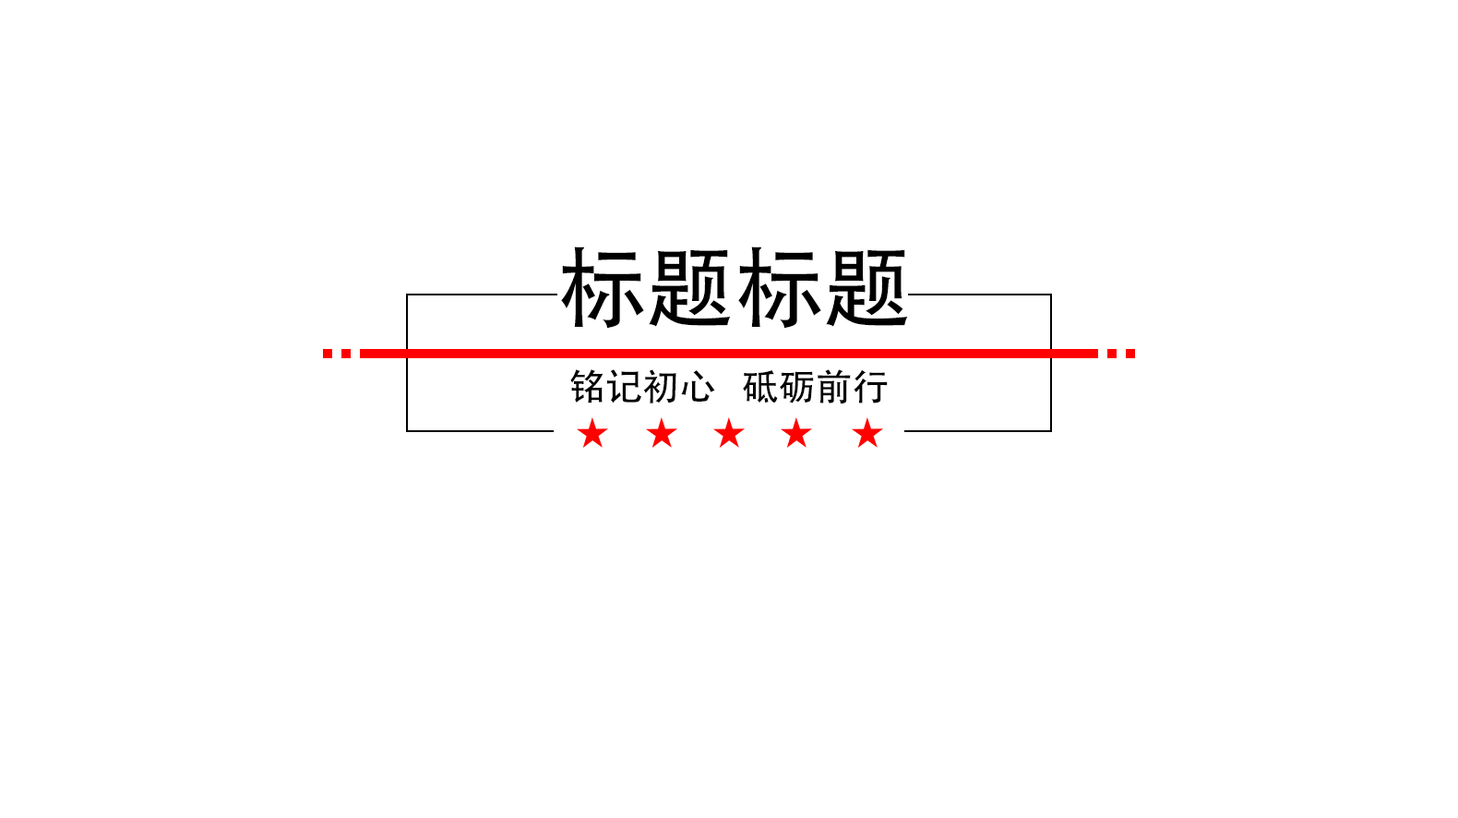
<style>
.page{position:relative;width:1458px;height:818px;background:#ffffff}
.page>*{position:absolute;margin:0}
.t1{font:88.6px "AdobeHeitiStd-Regular";color:#000000}
.t2{font:36.9px "AdobeHeitiStd-Regular";color:#000000}
</style>
<div class="page">
<p class="t1" style="left:561px;top:246px;width:347px;height:83px">标题标题</p>
<p class="t2" style="left:570px;top:369px;width:318px;height:35px">铭记初心   砥砺前行</p>
</div>
